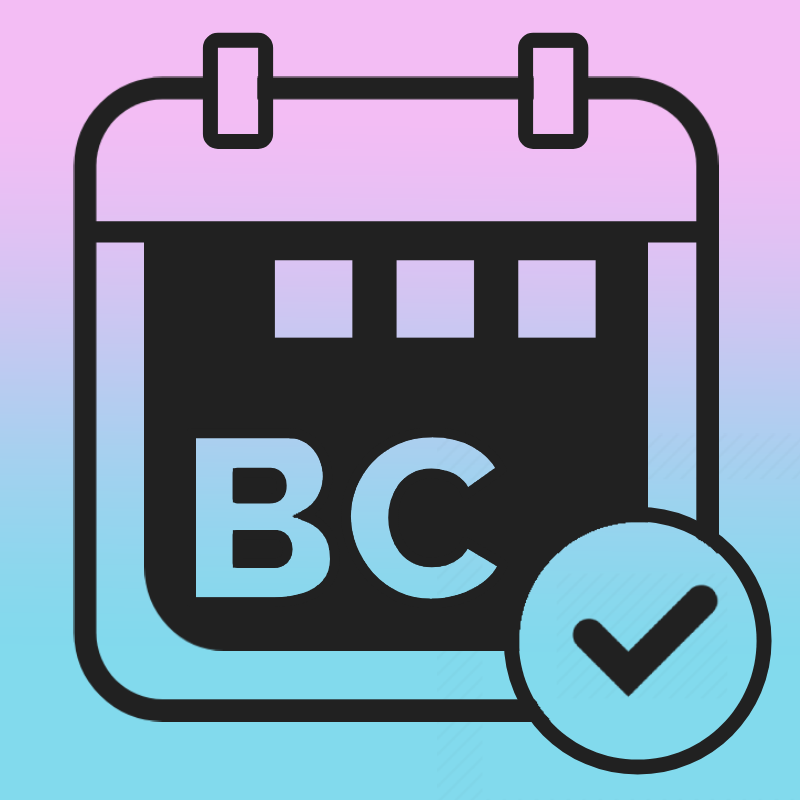
<style>
.page{position:relative;width:800px;height:800px;background:#212121}
.page>*{position:absolute;margin:0}
.t1{font:238px "Raleway-Black";color:#212121}
</style>
<div class="page">
<p class="t1" style="left:187px;top:428px;width:321px;height:180px">BC</p>
</div>
